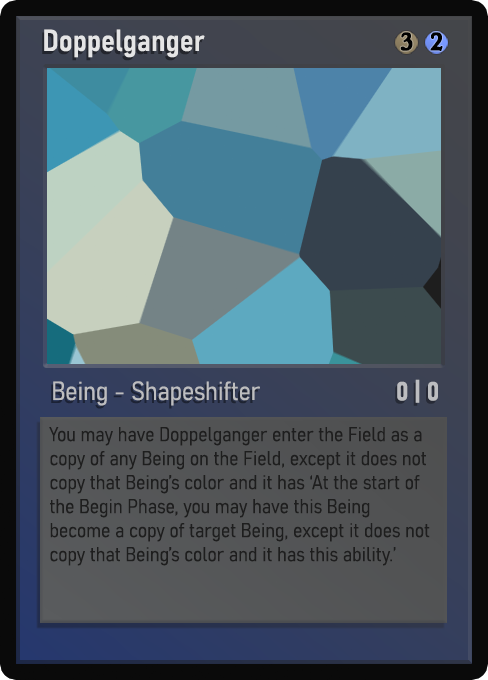
<style>
.page{position:relative;width:488px;height:680px}
.page>*{position:absolute;margin:0}
.t1{font:30px "Bahnschrift-SemiBoldSemiCondensed";color:#f2f2f2;font-weight:bold}
.t2{font:25px "WTRRoycroft";color:#000000;font-weight:bold;scale:1.09 1}
.t3{font:26px "Bahnschrift-LightSemiCondensed";color:#c8c8c8;font-weight:bold}
.t4{font:26px "Bahnschrift-BoldSemiCondensed";color:#bcbdc0;font-weight:bold}
.t5{font:20px "Bahnschrift-LightSemiCondensed";color:#1e1e1e;font-weight:bold}
</style>
<div class="page">
<p class="t1" style="left:44px;top:29px;width:161px;height:29px;opacity:0.9">Doppelganger</p>
<p class="t2" style="left:400px;top:32px;width:13px;height:19px">3</p>
<p class="t2" style="left:430px;top:32px;width:13px;height:19px">2</p>
<p class="t3" style="left:53px;top:381px;width:207px;height:25px;opacity:0.9">Being - Shapeshifter</p>
<p class="t4" style="left:397px;top:379px;width:41px;height:24px">0 | 0</p>
<p class="t5" style="left:49px;top:427px;width:381px;height:139px">You may have Doppelganger enter the Field as a copy of any Being on the Field, except it does not copy that Being’s color and it has ‘At the start of the Begin Phase, you may have this Being become a copy of target Being, except it does not copy that Being’s color and it has this ability.’</p>
</div>
